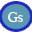
<style>
.page{position:relative;width:32px;height:32px;background:#5a97b3}
.page>*{position:absolute;margin:0}
.t1{font:14px "TimesNewRomanPSMT";color:#fefefe}
</style>
<div class="page">
<p class="t1" style="left:8px;top:12px;width:15px;height:10px">Gs</p>
</div>
